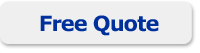
<style>
.page{position:relative;width:200px;height:53px;background:#efefef}
.page>*{position:absolute;margin:0}
.t1{font:21px "Verdana-Bold";letter-spacing:-0.05em;color:#00309c}
</style>
<div class="page">
<p class="t1" style="left:40px;top:15px;width:119px;height:21px">Free Quote</p>
</div>
